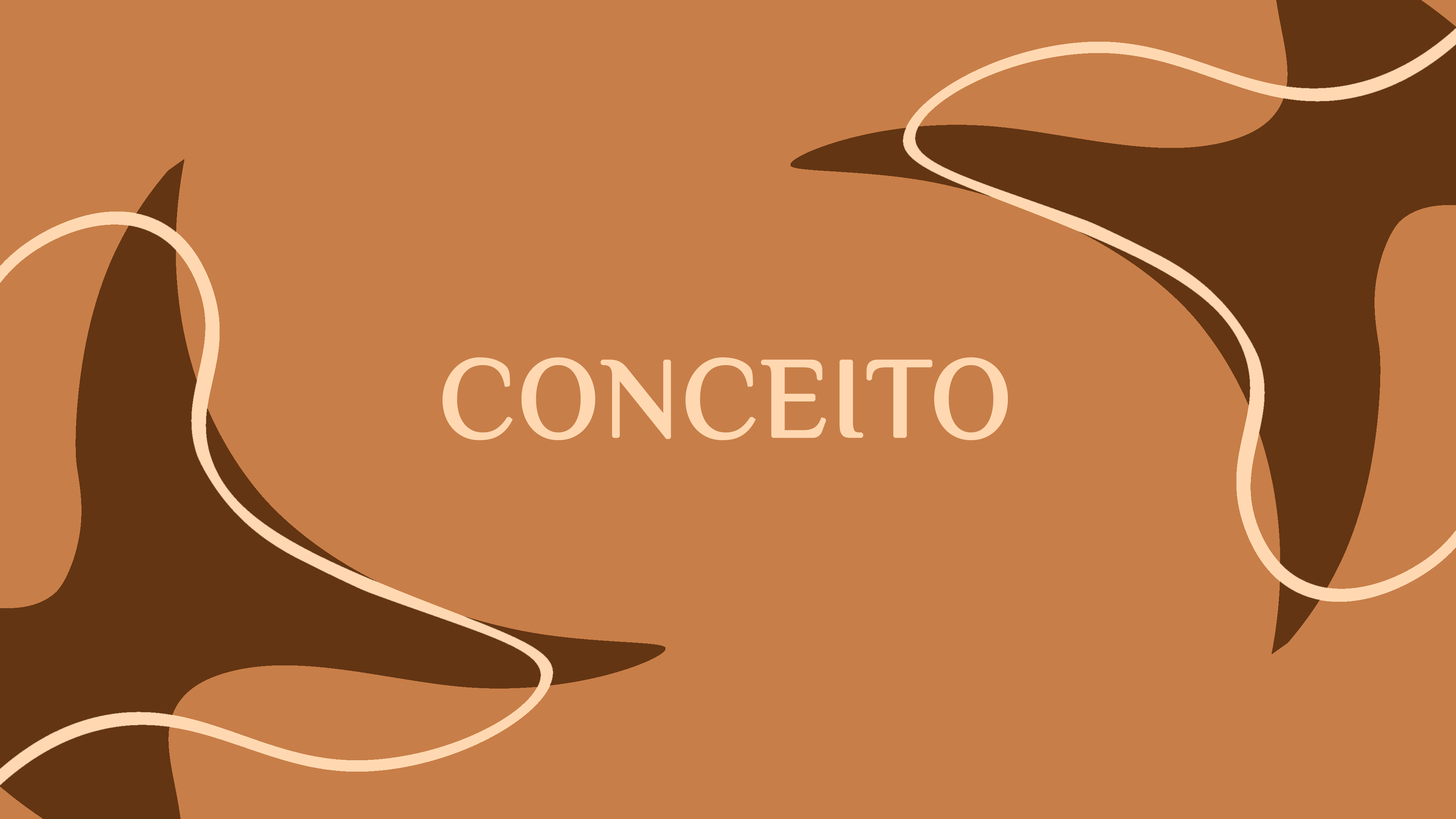
<style>
.page{position:relative;width:1456px;height:819px;background:#c87e48}
.page>*{position:absolute;margin:0}
.t1{font:113.7px "Philosopher";color:#ffd8b1;font-weight:bold}
</style>
<div class="page">
<p class="t1" style="left:442px;top:357px;width:566px;height:83px">CONCEITO</p>
</div>
